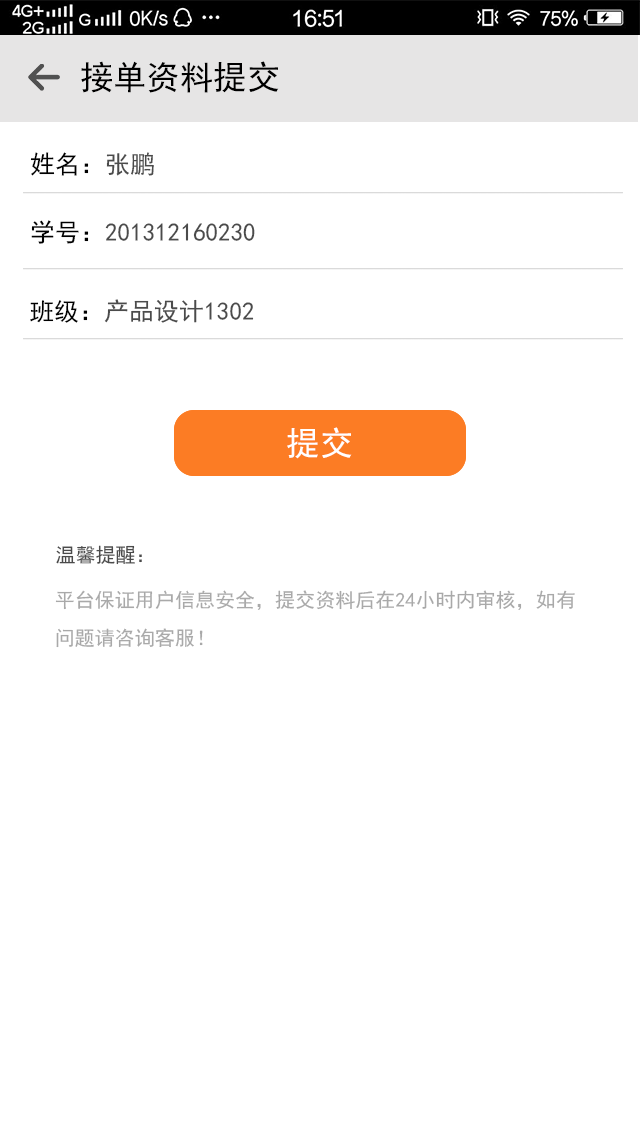
<style>
.page{position:relative;width:640px;height:1136px;background:#ffffff}
.page>*{position:absolute;margin:0}
.t1{font:33.3px "SimHei";letter-spacing:0.002em;color:#000000}
.t2{font:25px "SimHei";letter-spacing:0.002em;color:#000000}
.t3{font:25px "SimHei";letter-spacing:0.002em;color:#4b4b4b}
.t4{font:33.3px "SimHei";letter-spacing:0.002em;color:#ffffff}
.t5{font:20px "SimHei";letter-spacing:0.002em;color:#4b4b4b}
.t6{font:12px/38.1px "SimHei";letter-spacing:0.002em;color:#a9a9a9}
</style>
<div class="page">
<p class="t1" style="left:81px;top:61px;width:198px;height:32px">接单资料提交</p>
<p class="t2" style="left:30px;top:152px;width:124px;height:24px">姓名：<span class="t3">张鹏</span></p>
<p class="t3" style="left:31px;top:220px;width:224px;height:24px"><span class="t2">学号：</span>201312160230</p>
<p class="t3" style="left:30px;top:299px;width:224px;height:24px"><span class="t2">班级：</span>产品设计1302</p>
<p class="t4" style="left:287px;top:427px;width:65px;height:32px">提交</p>
<p class="t5" style="left:56px;top:545px;width:86px;height:20px">温馨提醒：</p>
<p class="t6" style="left:55px;top:590px;width:520px;height:58px">平台保证用户信息安全，提交资料后在24小时内审核，如有<br>问题请咨询客服！</p>
</div>
